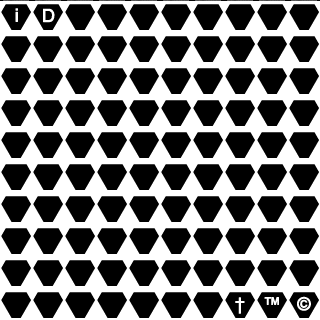
<style>
.page{position:relative;width:320px;height:320px;background:#000000}
.page>*{position:absolute;margin:0}
.t1{font:18px "ArialMT";color:#ffffff;font-weight:bold}
.t2{font:18px "ArialMT";font-weight:bold}
</style>
<div class="page">
<p class="t1" style="left:15px;top:7px;width:3px;height:14px">i</p>
<p class="t1" style="left:43px;top:7px;width:12px;height:15px">D</p>
<p class="t1" style="left:235px;top:296px;width:10px;height:17px">†</p>
<p class="t1" style="left:264px;top:296px;width:15px;height:8px">™</p>
<p class="t2" style="left:297px;top:295px;width:14px;height:15px">©</p>
</div>
